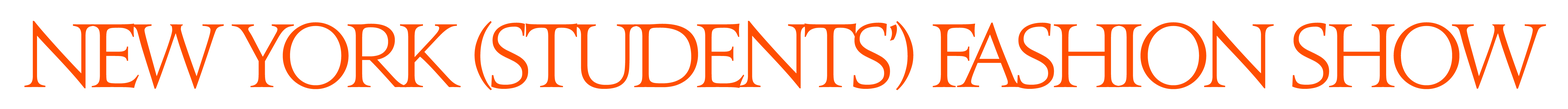
<style>
.page{position:relative;width:1568px;height:109px;background:#ffffff}
.page>*{position:absolute;margin:0}
.t1{font:81.5px "Jupiter";letter-spacing:-0.1em;color:#ff4e01;font-variant:small-caps}
</style>
<div class="page">
<p class="t1" style="left:24px;top:21px;width:1522px;height:69px">NEW YORK (STUDENTS’) FASHION SHOW</p>
</div>
